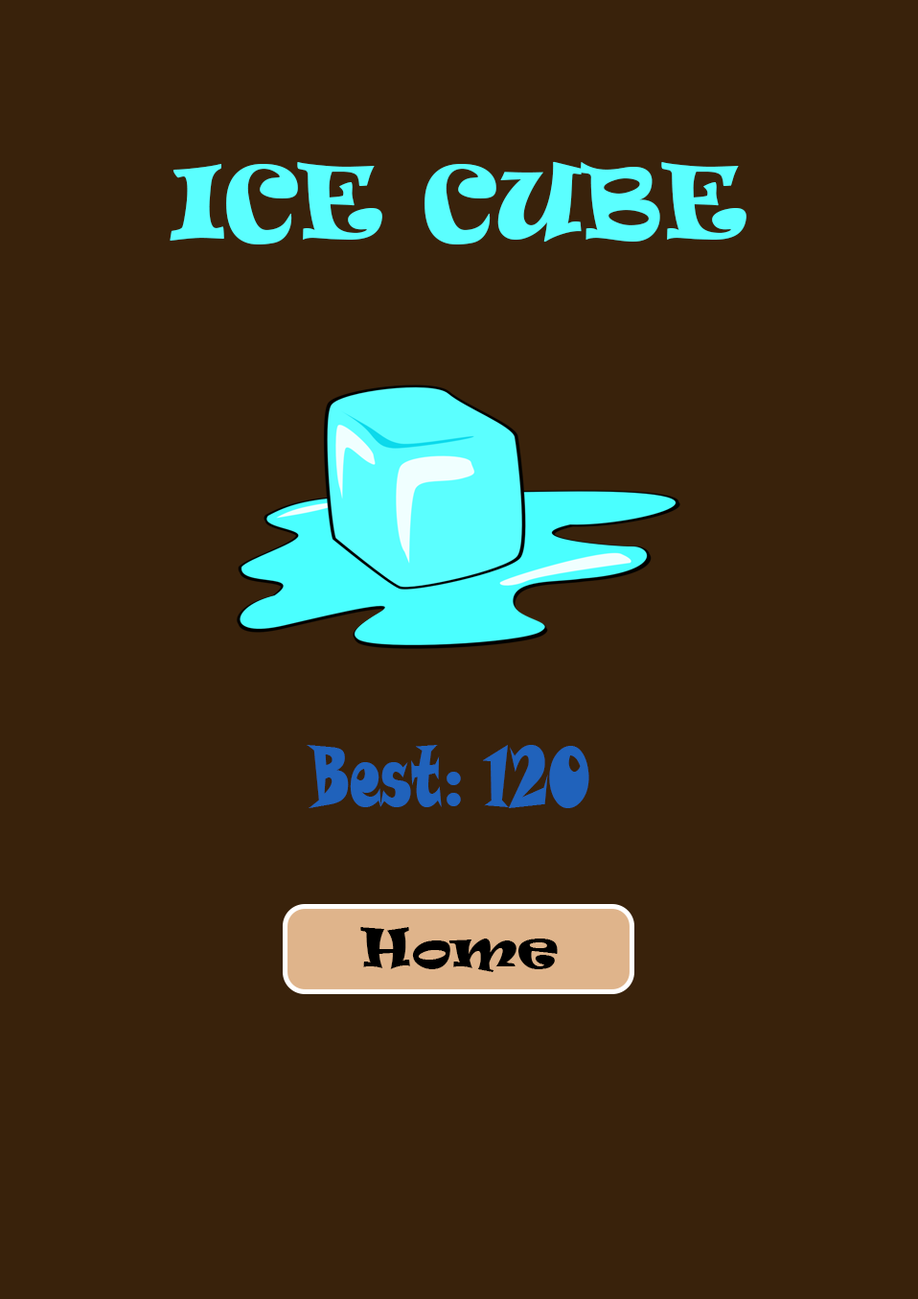
<style>
.page{position:relative;width:918px;height:1299px;background:#39220b}
.page>*{position:absolute;margin:0}
.t1{font:95.9px "Ravie";color:#5bffff;scale:1.04 1}
.t2{font:83.9px "SnapITC-Regular";color:#2062bb;scale:0.59 1}
.t3{font:50px "Ravie";color:#000000;scale:1.11 1}
</style>
<div class="page">
<p class="t1" style="left:170px;top:161px;width:577px;height:83px">ICE CUBE</p>
<p class="t2" style="left:307px;top:745px;width:282px;height:63px">Best: 120</p>
<p class="t3" style="left:360px;top:927px;width:198px;height:45px">Home</p>
</div>
